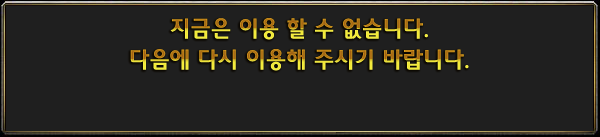
<style>
.page{position:relative;width:600px;height:137px;background:#1f1f1f}
.page>*{position:absolute;margin:0}
.t1{font:24px "2002L"}
</style>
<div class="page">
<p class="t1" style="left:170px;top:18px;width:258px;height:22px">지금은 이용 할 수 없습니다.</p>
<p class="t1" style="left:130px;top:49px;width:339px;height:22px">다음에 다시 이용해 주시기 바랍니다.</p>
</div>
